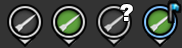
<style>
.page{position:relative;width:182px;height:48px;background:#333333}
.page>*{position:absolute;margin:0}
.t1{font:23.2px "Arial-Black";letter-spacing:0.03em;color:#ffffff}
</style>
<div class="page">
<p class="t1" style="left:120px;top:4px;width:13px;height:17px">?</p>
</div>
